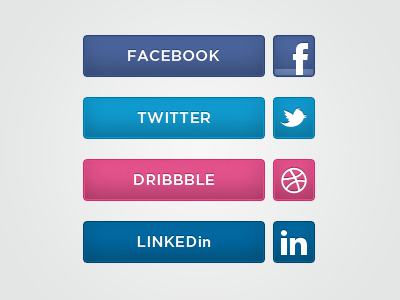
<style>
.page{position:relative;width:400px;height:300px}
.page>*{position:absolute;margin:0}
.t1{font:15px "GothamHTF-Medium";letter-spacing:0.025em;color:#ffffff;text-transform:uppercase}
.t2{font:15px "GothamHTF-Medium";letter-spacing:0.025em;color:#ffffff}
</style>
<div class="page">
<p class="t1" style="left:128px;top:50px;width:92px;height:11px">Facebook</p>
<p class="t1" style="left:137px;top:112px;width:73px;height:11px">Twitter</p>
<p class="t1" style="left:134px;top:174px;width:81px;height:11px">Dribbble</p>
<p class="t1" style="left:137px;top:236px;width:74px;height:11px">Linked<span class="t2">in</span></p>
</div>
